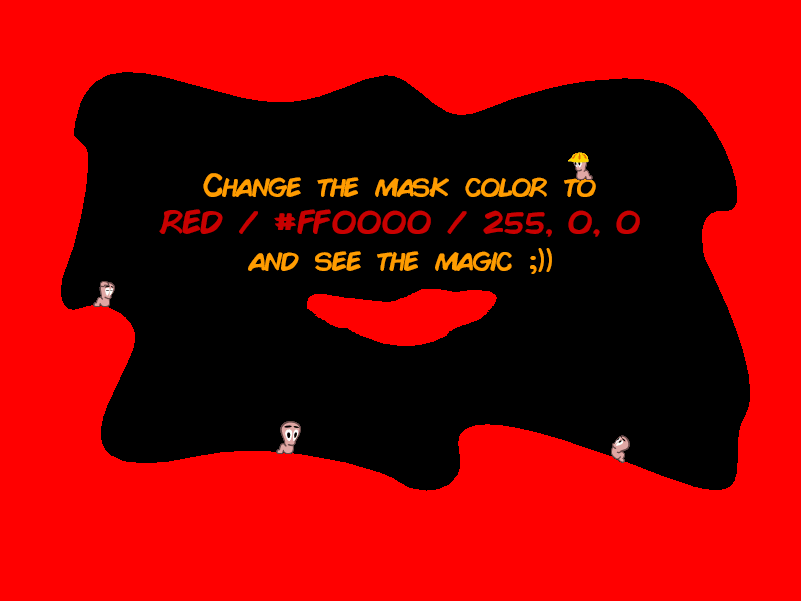
<style>
.page{position:relative;width:801px;height:601px;background:#ff0000}
.page>*{position:absolute;margin:0}
.t1{font:32px/37px "ComicBook";letter-spacing:-0.02em;color:#c80000}
.t2{font:32px/37px "ComicBook";letter-spacing:-0.02em;color:#ff9c00}
.t3{font:32px/37px "KristenITC-Regular";letter-spacing:-0.02em;color:#ff9c00}
</style>
<div class="page">
<p class="t1" style="left:159px;top:173px;width:481px;height:101px;text-align:center"><span class="t2">Change the mask color to<br></span>RED / #FF0000 / 255, 0, 0<br><span class="t2">and see the magic </span><span class="t3">;))</span></p>
</div>
